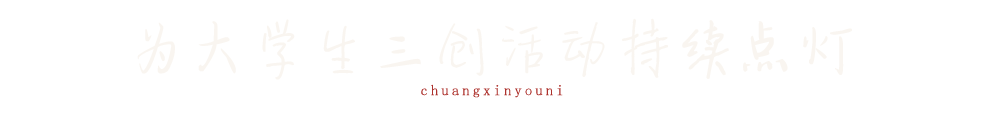
<style>
.page{position:relative;width:983px;height:113px;background:#ffffff}
.page>*{position:absolute;margin:0}
.t1{font:59.2px "SentyTEA-Platinum";color:#f9f5f0}
.t2{font:14.8px "zktqkt";letter-spacing:0.2em;color:#ad322d}
</style>
<div class="page">
<p class="t1" style="left:137px;top:18px;width:715px;height:62px">为大学生三创活动持续点灯</p>
<p class="t2" style="left:421px;top:84px;width:142px;height:14px">chuangxinyouni</p>
</div>
